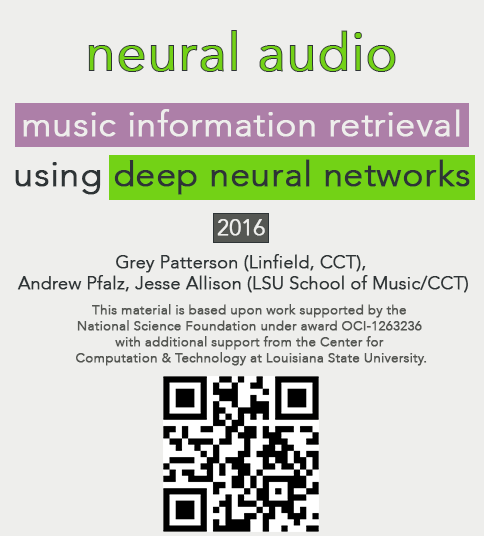
<style>
.page{position:relative;width:484px;height:536px;background:#eeeeec}
.page>*{position:absolute;margin:0}
.t1{font:53px "Avenir-Roman";font-weight:bold}
.t2{font:35.3px "Avenir-Light";color:#eeeeec;font-weight:bold}
.t3{font:35.3px "Avenir-Light";color:#2e3436;font-weight:bold}
.t4{font:22.1px "Avenir-Light";color:#eeeeec;font-weight:bold}
.t5{font:17.7px "Avenir-Light";color:#2e3436;font-weight:bold}
.t6{font:13.2px "Avenir-Light";color:#555753;font-weight:bold}
</style>
<div class="page">
<p class="t1" style="left:88px;top:30px;width:308px;height:42px">neural audio</p>
<p class="t2" style="left:23px;top:109px;width:437px;height:28px">music information retrieval</p>
<p class="t3" style="left:15px;top:159px;width:455px;height:36px">using deep neural networks</p>
<p class="t4" style="left:217px;top:219px;width:48px;height:17px">2016</p>
<p class="t5" style="left:17px;top:254px;width:451px;height:39px;text-align:center">Grey Patterson (Linfield, CCT), <br>Andrew Pfalz, Jesse Allison (LSU School of Music/CCT)</p>
<p class="t6" style="left:76px;top:304px;width:351px;height:62px;text-align:center">This material is based upon work supported by the <br>National Science Foundation under award OCI-1263236 <br>with additional support from the Center for <br>Computation &amp; Technology at Louisiana State University.</p>
</div>
